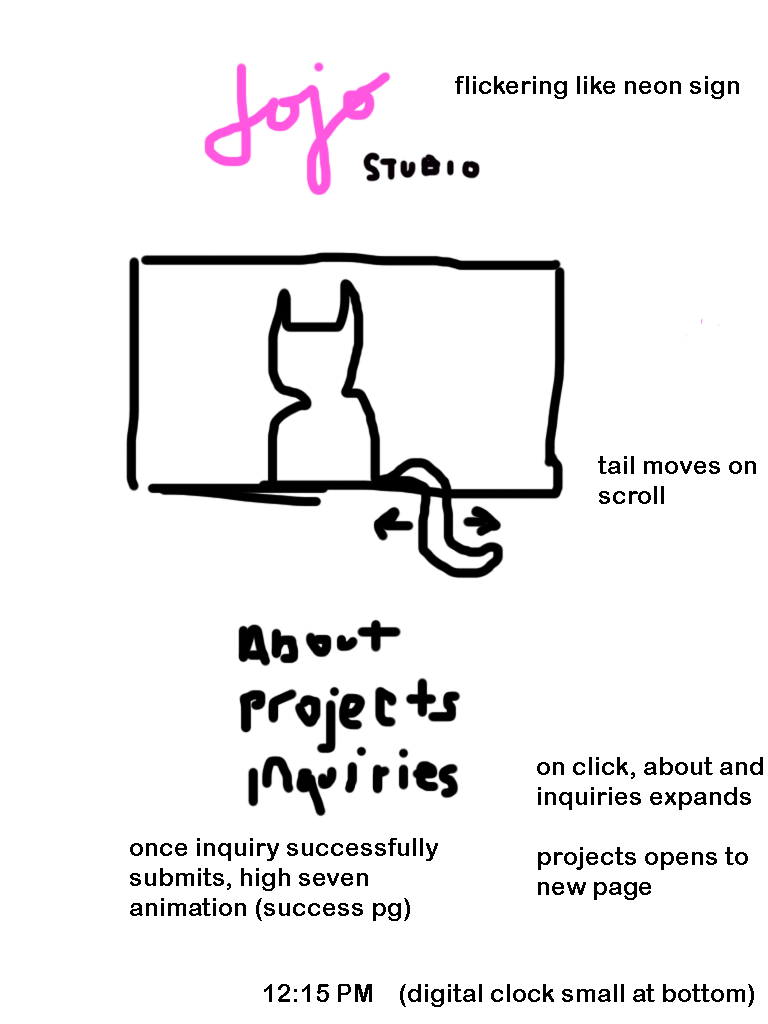
<style>
.page{position:relative;width:768px;height:1024px;background:#ffffff}
.page>*{position:absolute;margin:0}
.t1{font:25px "ArialRoundedMTBold";color:#000000}
</style>
<div class="page">
<p class="t1" style="left:455px;top:76px;width:284px;height:23px">flickering like neon sign</p>
<p class="t1" style="left:598px;top:456px;width:158px;height:48px">tail moves on<br>scroll</p>
<p class="t1" style="left:537px;top:757px;width:226px;height:143px">on click, about and <br>inquiries expands<br><br>projects opens to <br>new page</p>
<p class="t1" style="left:130px;top:838px;width:308px;height:83px">once inquiry successfully<br>submits, high seven<br>animation (success pg)</p>
<p class="t1" style="left:264px;top:984px;width:490px;height:23px">12:15 PM    (digital clock small at bottom)</p>
</div>
